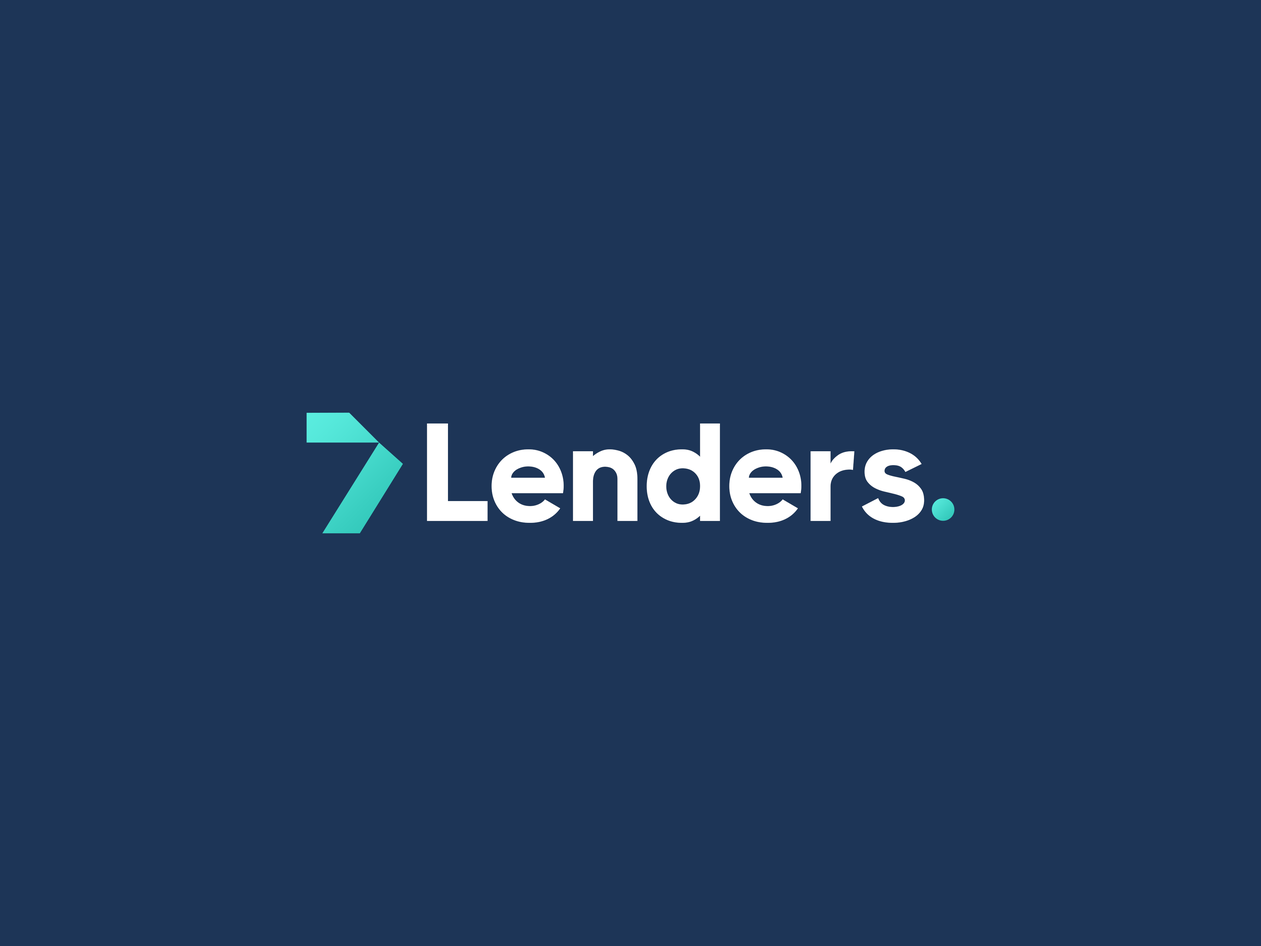
<style>
.page{position:relative;width:1261px;height:946px;background:#1d3557}
.page>*{position:absolute;margin:0}
.t1{font:139.2px "THICCCBOI-ExtraBold";color:#ffffff}
</style>
<div class="page">
<p class="t1" style="left:427px;top:423px;width:497px;height:100px">Lenders</p>
</div>
